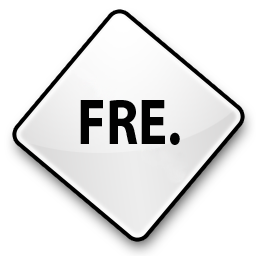
<style>
.page{position:relative;width:256px;height:256px;background:#ffffff}
.page>*{position:absolute;margin:0}
.t1{font:66px "MyriadPro-Bold";letter-spacing:0.005em;color:#010101;scale:0.82 1}
</style>
<div class="page">
<p class="t1" style="left:80px;top:100px;width:100px;height:45px">FRE.</p>
</div>
